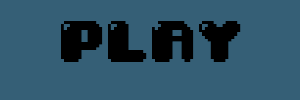
<style>
.page{position:relative;width:300px;height:100px;background:#355f76}
.page>*{position:absolute;margin:0}
.t1{font:50px "04b30";color:#000000}
</style>
<div class="page">
<p class="t1" style="left:61px;top:21px;width:180px;height:41px">PLAY</p>
</div>
